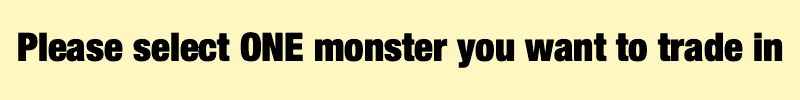
<style>
.page{position:relative;width:800px;height:100px;background:#fff7c2}
.page>*{position:absolute;margin:0}
.t1{font:39px "HelveticaNeue-CondensedBlack";color:#010101}
</style>
<div class="page">
<p class="t1" style="left:18px;top:32px;width:765px;height:36px">Please select ONE monster you want to trade in</p>
</div>
